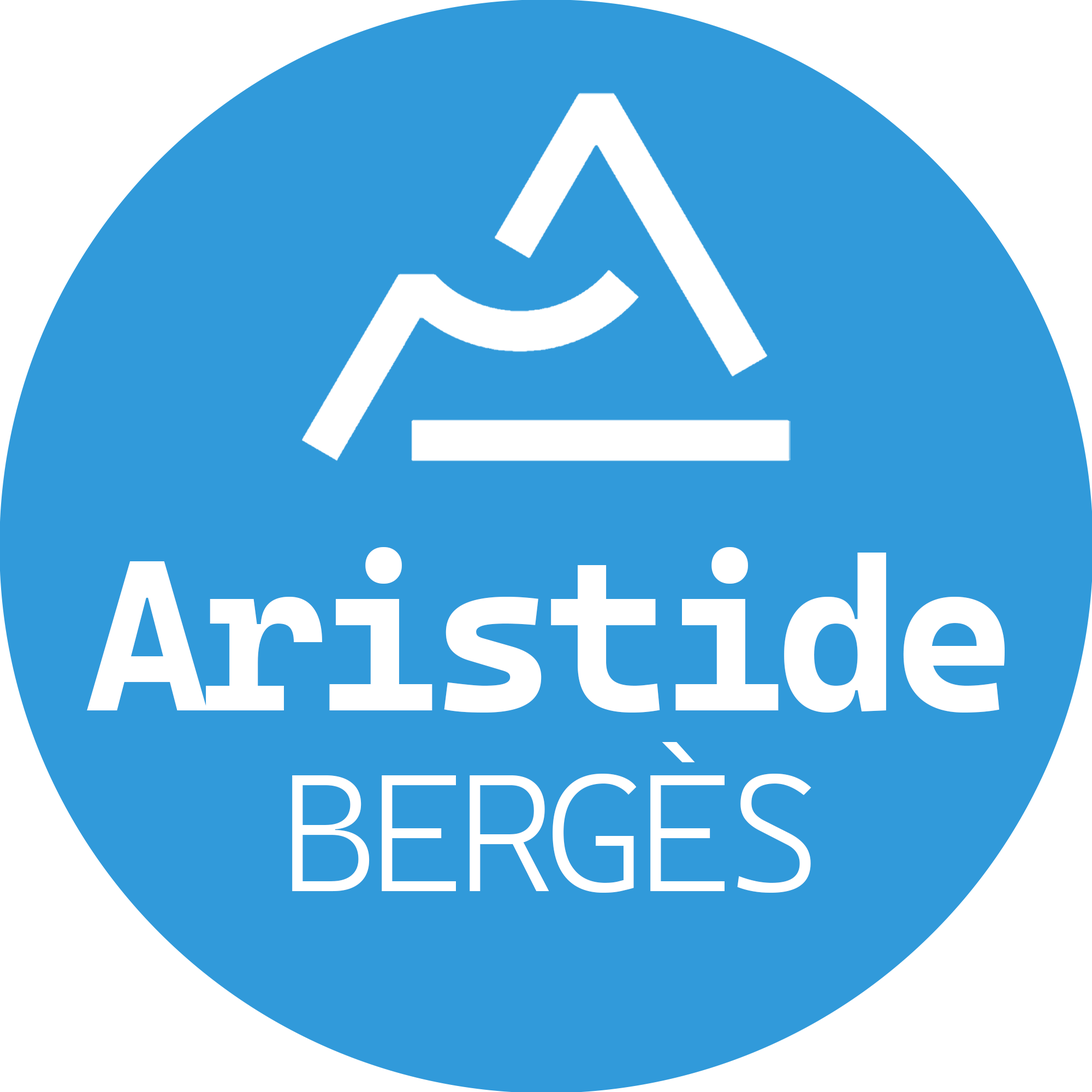
<style>
.page{position:relative;width:1092px;height:1092px;background:#319ada}
.page>*{position:absolute;margin:0}
.t1{font:215.1px/180.9px "CascadiaCodeRoman-Bold";letter-spacing:-0.05em;color:#ffffff;font-weight:bold;font-style:italic}
.t2{font:167px/180.9px "CascadiaCodeRoman-Light";letter-spacing:-0.05em;color:#ffffff;font-weight:bold;font-style:italic}
</style>
<div class="page">
<p class="t1" style="left:87px;top:547px;width:918px;height:346px;text-align:center">Aristide<br><span class="t2">BERGÈS</span></p>
</div>
